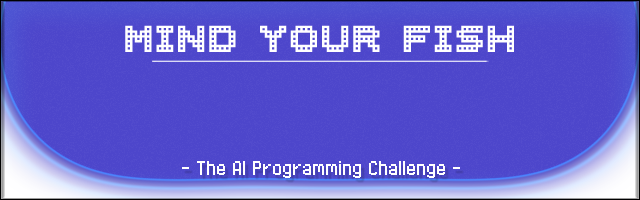
<style>
.page{position:relative;width:640px;height:200px;background:#4d46cb}
.page>*{position:absolute;margin:0}
.t1{font:36px "BMblockA15";color:#ffffff}
.t2{font:23.7px "PixelOperator";color:#ffffff}
</style>
<div class="page">
<p class="t1" style="left:125px;top:25px;width:389px;height:27px">MIND YOUR FISH</p>
<p class="t2" style="left:182px;top:161px;width:278px;height:17px">- The AI Programming Challenge -</p>
</div>
